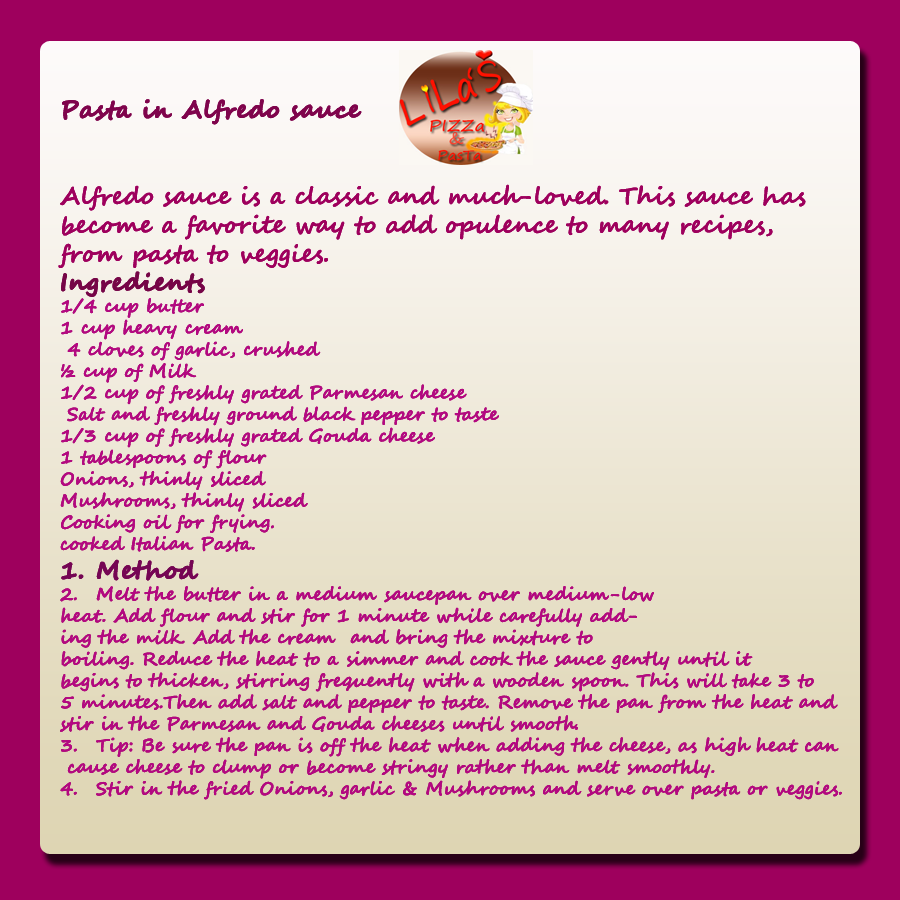
<style>
.page{position:relative;width:900px;height:900px}
.page>*{position:absolute;margin:0}
.t1{font:18px "SegoeScript-Bold";color:#b30881}
.t2{font:24px "SegoeScript-Bold";color:#b30881;font-weight:bold}
.t3{font:24px "SegoeScript-Bold";color:#b30881}
.t4{font:24px "SegoeScript-Bold";color:#7f044c;font-weight:bold}
.t5{font:24px "SegoeScript-Bold";color:#9e005d}
.t6{font:24px "SegoeScript-Bold";color:#760547;font-weight:bold}
.t7{font:24px "SegoeScript-Bold";color:#750554;font-weight:bold}
</style>
<div class="page">
<p class="t1" style="left:58px;top:99px;width:784px;height:701px"><span class="t2">Pasta in Alfredo sauce <br></span><span class="t3"><br><br>Alfredo sauce is a classic and much-loved. This sauce has <br>become a favorite way to add opulence to many recipes, <br>from pasta to veggies.<br></span><span class="t2">Ingredients<br></span>1/4 cup butter<br>1 cup heavy cream<br> 4 cloves of garlic, crushed<br>½ cup of Milk<br>1/2 cup of freshly grated Parmesan cheese<br> Salt and freshly ground black pepper to taste<br>1/3 cup of freshly grated Gouda cheese<br>1 tablespoons of flour<br>Onions, thinly sliced<br>Mushrooms, thinly sliced<br>Cooking oil for frying.<br>cooked Italian Pasta.<br><span class="t2">1. Method <br></span>2. Melt the butter in a medium saucepan over medium-low <br>heat. Add flour and stir for 1 minute while carefully add-<br>ing the milk. Add the cream  and bring the mixture to <br>boiling. Reduce the heat to a simmer and cook the sauce gently until it <br>begins to thicken, stirring frequently with a wooden spoon. This will take 3 to <br>5 minutes.Then add salt and pepper to taste. Remove the pan from the heat and <br>stir in the Parmesan and Gouda cheeses until smooth.<br>3. Tip: Be sure the pan is off the heat when adding the cheese, as high heat can<br> cause cheese to clump or become stringy rather than melt smoothly.<br>4. Stir in the fried Onions, garlic &amp; Mushrooms and serve over pasta or veggies.</p>
<p class="t1" style="left:58px;top:99px;width:784px;height:701px"><span class="t4">Pasta in Alfredo sauce <br></span><span class="t5"><br><br>Alfredo sauce is a classic and much-loved. This sauce has <br>become a favorite way to add opulence to many recipes, <br>from pasta to veggies.<br></span><span class="t6">Ingredients<br></span>1/4 cup butter<br>1 cup heavy cream<br> 4 cloves of garlic, crushed<br>½ cup of Milk<br>1/2 cup of freshly grated Parmesan cheese<br> Salt and freshly ground black pepper to taste<br>1/3 cup of freshly grated Gouda cheese<br>1 tablespoons of flour<br>Onions, thinly sliced<br>Mushrooms, thinly sliced<br>Cooking oil for frying.<br>cooked Italian Pasta.<br><span class="t7">1. Method <br></span>2. Melt the butter in a medium saucepan over medium-low <br>heat. Add flour and stir for 1 minute while carefully add-<br>ing the milk. Add the cream  and bring the mixture to <br>boiling. Reduce the heat to a simmer and cook the sauce gently until it <br>begins to thicken, stirring frequently with a wooden spoon. This will take 3 to <br>5 minutes.Then add salt and pepper to taste. Remove the pan from the heat and <br>stir in the Parmesan and Gouda cheeses until smooth.<br>3. Tip: Be sure the pan is off the heat when adding the cheese, as high heat can<br> cause cheese to clump or become stringy rather than melt smoothly.<br>4. Stir in the fried Onions, garlic &amp; Mushrooms and serve over pasta or veggies.</p>
</div>
